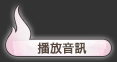
<style>
.page{position:relative;width:117px;height:62px;background:#333333}
.page>*{position:absolute;margin:0}
.t1{font:12px "AdobeFanHeitiStd-Bold";color:#59493f;font-weight:bold}
</style>
<div class="page">
<p class="t1" style="left:37px;top:42px;width:50px;height:12px">播放音訊</p>
</div>
